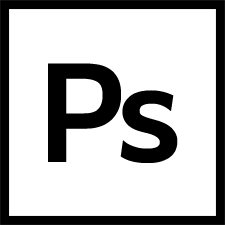
<style>
.page{position:relative;width:225px;height:225px;background:#ffffff}
.page>*{position:absolute;margin:0}
.t1{font:135.5px "Cabin-Regular";letter-spacing:-0.05em;color:#000000;font-weight:bold;scale:1.09 1}
</style>
<div class="page">
<p class="t1" style="left:48px;top:63px;width:130px;height:100px">Ps</p>
</div>
